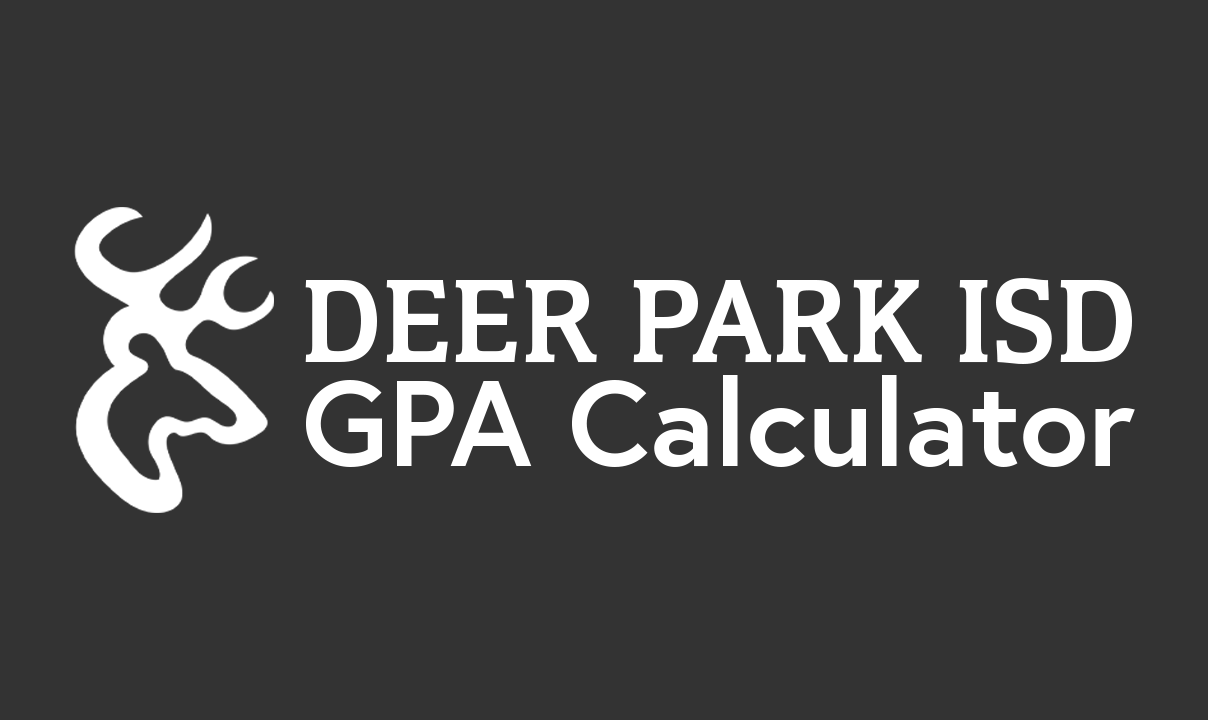
<style>
.page{position:relative;width:1208px;height:720px;background:#333333}
.page>*{position:absolute;margin:0}
.t1{font:123.1px "Congress-Bol";color:#ffffff;text-transform:uppercase}
.t2{font:120.8px "Europa-Bold";color:#ffffff}
</style>
<div class="page">
<p class="t1" style="left:305px;top:278px;width:827px;height:86px">Deer Park ISD</p>
<p class="t2" style="left:306px;top:375px;width:829px;height:92px">GPA Calculator</p>
</div>
